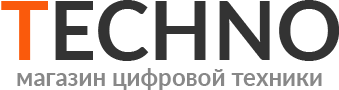
<style>
.page{position:relative;width:339px;height:90px;background:#ffffff}
.page>*{position:absolute;margin:0}
.t1{font:82px "Lato-Bold";color:#333333}
.t2{font:82px "Lato-Bold";color:#fa5a0c}
.t3{font:24px "Lato-Bold";color:#888888}
</style>
<div class="page">
<p class="t1" style="left:1px;top:0px;width:339px;height:61px"><span class="t2">T</span>ECHNO</p>
<p class="t3" style="left:17px;top:68px;width:305px;height:22px">магазин цифровой техники</p>
</div>
